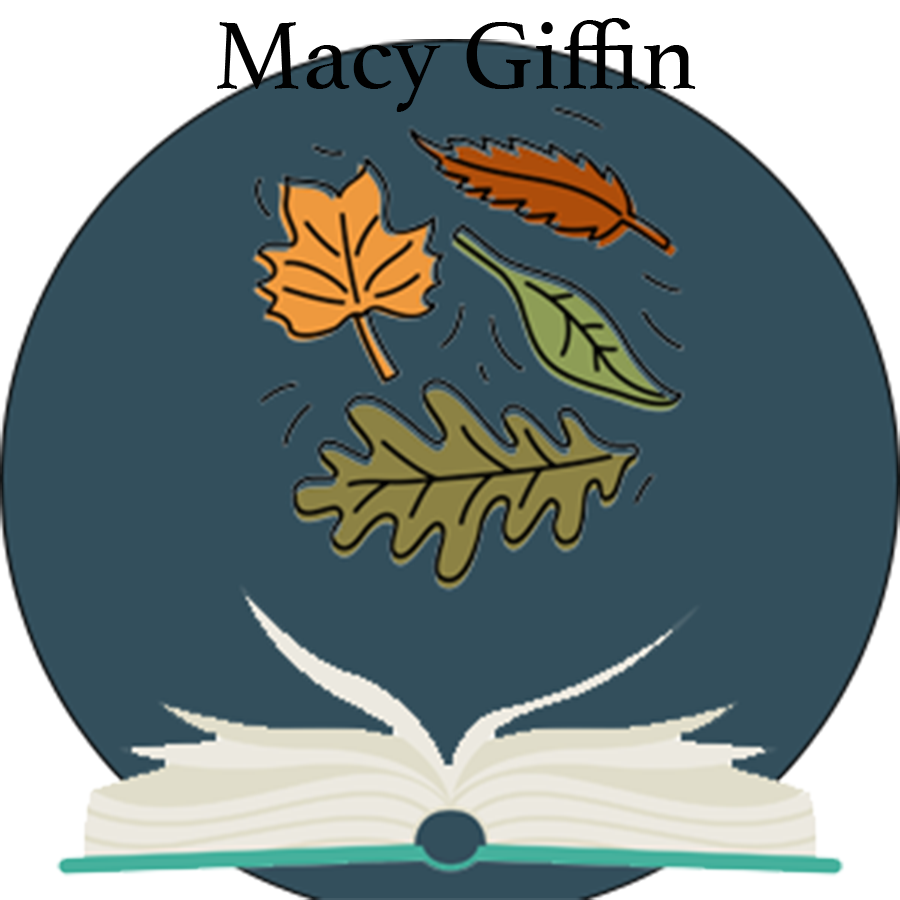
<style>
.page{position:relative;width:900px;height:900px;background:#334f5c}
.page>*{position:absolute;margin:0}
.t1{font:100px "Athelas-Regular";color:#010101}
</style>
<div class="page">
<p class="t1" style="left:217px;top:18px;width:479px;height:94px">Macy Giffin</p>
</div>
